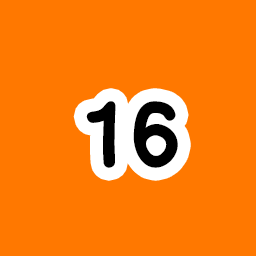
<style>
.page{position:relative;width:256px;height:256px;background:#ff7800}
.page>*{position:absolute;margin:0}
.t1{font:90px "ComicHelvetic-Medium";color:#000000}
</style>
<div class="page">
<p class="t1" style="left:86px;top:101px;width:92px;height:67px">16</p>
</div>
